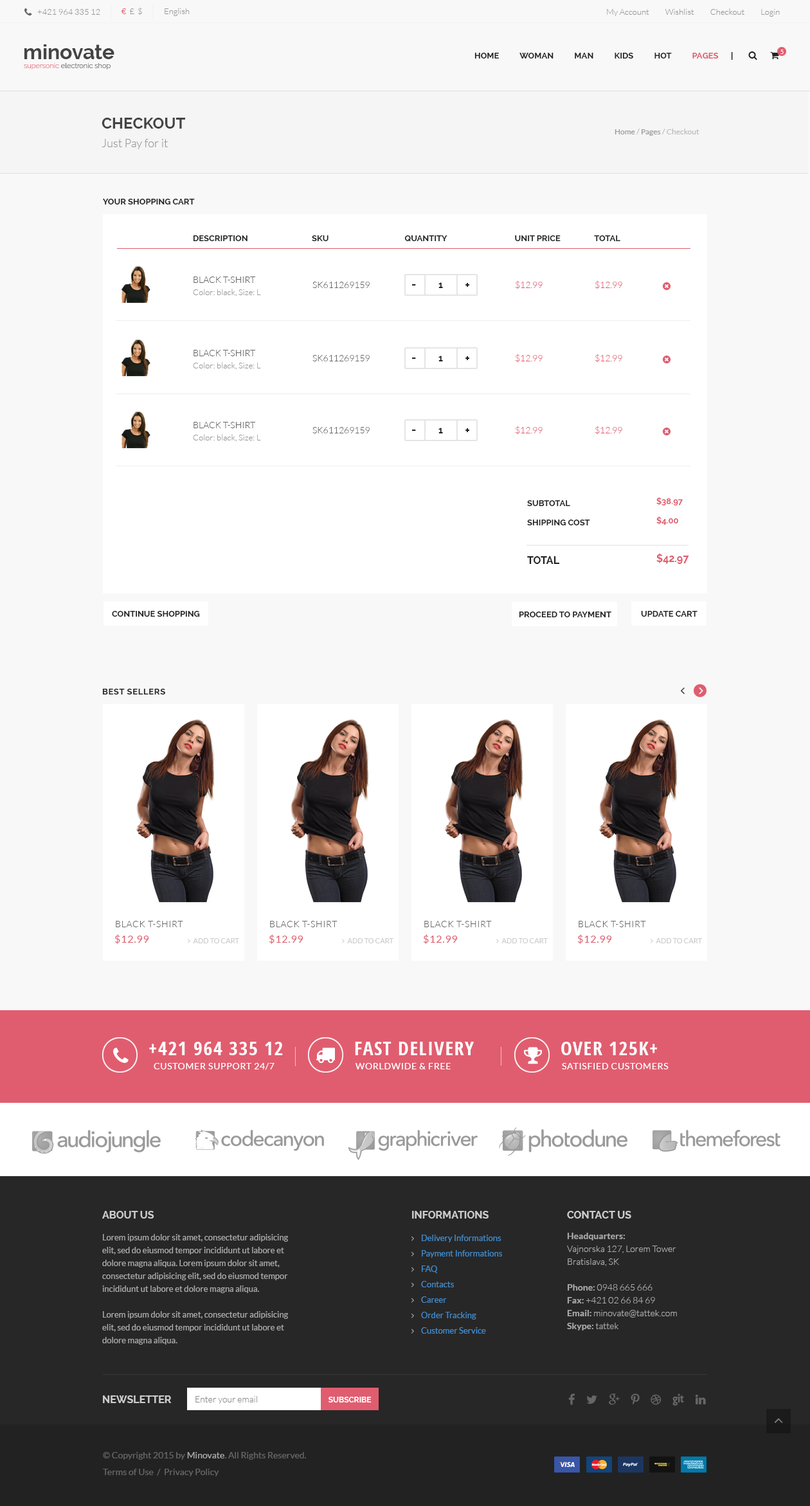
<style>
.page{position:relative;width:810px;height:1506px;background:#ffffff}
.page>*{position:absolute;margin:0}
.t1{font:8.4px "Lato-Light";color:#999999;text-transform:uppercase}
.t2{font:8.4px "Lato-Light";color:#999999}
.t3{font:8.4px "Lato-Light";color:#e05d6f}
.t4{font:20.6px "Raleway-Bold";color:#444444}
.t5{font:5.8px "Lato-Regular";color:#ffffff;text-transform:uppercase}
.t6{font:7.1px "Raleway-Light";color:#444444}
.t7{font:7.1px "Raleway-Light";color:#e05d6f}
.t8{font:15.4px "Raleway-Bold";color:#444444;text-transform:uppercase}
.t9{font:7.7px "Lato-Regular";color:#bbbbbb}
.t10{font:7.7px "Lato-Regular";color:#999999}
.t11{font:11.6px "Lato-Light";color:#999999}
.t12{font:8.4px "Raleway-Bold";color:#222222;text-transform:uppercase}
.t13{font:9px "Lato-Light";color:#666666;text-transform:uppercase}
.t14{font:9px "Lato-Light";color:#e05d6f}
.t15{font:11.6px "Raleway-Bold";color:#222222;text-transform:uppercase}
.t16{font:9px "Raleway-Bold";color:#222222;text-transform:uppercase}
.t17{font:8.4px/19.3px "Raleway-Bold";color:#e05d6f;text-transform:uppercase}
.t18{font:10.3px/19.3px "Raleway-Bold";color:#e05d6f;text-transform:uppercase}
.t19{font:8.4px/19.3px "Raleway-Bold";color:#222222;text-transform:uppercase}
.t20{font:10.3px/19.3px "Raleway-Bold";color:#222222;text-transform:uppercase}
.t21{font:8.4px "Raleway-Bold";letter-spacing:0.05em;color:#222222;text-transform:uppercase}
.t22{font:9px "Lato-Light";letter-spacing:0.05em;color:#666666;text-transform:uppercase}
.t23{font:10.3px "Lato-Regular";letter-spacing:0.05em;color:#e05d6f;text-transform:uppercase}
.t24{font:19.3px "OpenSans-CondensedBold";letter-spacing:0.05em;color:#ffffff;text-transform:uppercase}
.t25{font:9px "Lato-Regular";letter-spacing:0.05em;color:#ffffff;text-transform:uppercase}
.t26{font:10.3px "Raleway-Bold";color:#cccccc;text-transform:uppercase}
.t27{font:8.4px/12.9px "Lato-Regular";color:#aaaaaa}
.t28{font:8.4px/15.4px "Lato-Regular";color:#428bca}
.t29{font:9px/12.9px "Lato-Light";color:#aaaaaa}
.t30{font:9px/12.9px "Lato-Bold";color:#aaaaaa}
.t31{font:9px "Lato-Light";color:#8c8c8c}
.t32{font:7.7px "Raleway-Bold";color:#ffffff;text-transform:uppercase}
.t33{font:9px "Lato-Regular";color:#666666}
.t34{font:9px "Lato-Regular";color:#aaaaaa}
</style>
<div class="page">
<p class="t1" style="left:37px;top:9px;width:63px;height:6px">+421 964 335 12</p>
<p class="t2" style="left:122px;top:7px;width:20px;height:8px"><span class="t3">€</span>  £  $</p>
<p class="t2" style="left:165px;top:8px;width:25px;height:8px">English</p>
<p class="t2" style="left:607px;top:8px;width:173px;height:9px">My Account          Wishlist          Checkout          Login</p>
<p class="t4" style="left:24px;top:44px;width:90px;height:15px">minovate</p>
<p class="t5" style="left:780px;top:50px;width:4px;height:4px">5</p>
<p class="t6" style="left:24px;top:63px;width:87px;height:6px"><span class="t7">supersonic </span>electronic shop</p>
<p class="t8" style="left:102px;top:118px;width:83px;height:11px">Checkout</p>
<p class="t9" style="left:615px;top:129px;width:84px;height:7px"><span class="t10">Home </span>/<span class="t10"> Pages </span>/ Checkout</p>
<p class="t11" style="left:102px;top:139px;width:66px;height:10px">Just Pay for it</p>
<p class="t12" style="left:103px;top:199px;width:92px;height:5px">Your Shopping Cart</p>
<p class="t12" style="left:193px;top:235px;width:427px;height:6px">Description                                SKU                                      quantity                                  unit price                 total</p>
<p class="t13" style="left:194px;top:276px;width:62px;height:7px">Black T-Shirt</p>
<p class="t13" style="left:312px;top:282px;width:58px;height:6px">SK611269159</p>
<p class="t14" style="left:515px;top:280px;width:28px;height:9px">$12.99</p>
<p class="t14" style="left:595px;top:280px;width:27px;height:9px">$12.99</p>
<p class="t2" style="left:193px;top:289px;width:68px;height:7px">Color: black, Size: L</p>
<p class="t15" style="left:412px;top:282px;width:57px;height:6px">-        <span class="t16">1</span>        +</p>
<p class="t13" style="left:194px;top:350px;width:62px;height:6px">Black T-Shirt</p>
<p class="t14" style="left:515px;top:354px;width:28px;height:9px">$12.99</p>
<p class="t14" style="left:595px;top:354px;width:27px;height:9px">$12.99</p>
<p class="t2" style="left:193px;top:362px;width:68px;height:8px">Color: black, Size: L</p>
<p class="t13" style="left:312px;top:355px;width:58px;height:6px">SK611269159</p>
<p class="t15" style="left:412px;top:356px;width:57px;height:5px">-        <span class="t16">1</span>        +</p>
<p class="t13" style="left:194px;top:422px;width:62px;height:6px">Black T-Shirt</p>
<p class="t14" style="left:515px;top:426px;width:28px;height:9px">$12.99</p>
<p class="t14" style="left:595px;top:426px;width:27px;height:9px">$12.99</p>
<p class="t2" style="left:193px;top:434px;width:68px;height:8px">Color: black, Size: L</p>
<p class="t13" style="left:312px;top:427px;width:58px;height:6px">SK611269159</p>
<p class="t15" style="left:412px;top:428px;width:57px;height:5px">-        <span class="t16">1</span>        +</p>
<p class="t17" style="left:656px;top:497px;width:33px;height:67px">$38.97<br>$4.00<br><br><span class="t18">$42.97</span></p>
<p class="t19" style="left:527px;top:500px;width:63px;height:64px">subtotal<br>shipping cost<br><br><span class="t20">total</span></p>
<p class="t12" style="left:112px;top:611px;width:88px;height:5px">Continue shopping</p>
<p class="t12" style="left:519px;top:611px;width:92px;height:6px">Proceed to payment</p>
<p class="t12" style="left:641px;top:611px;width:57px;height:5px">update cart</p>
<p class="t21" style="left:102px;top:688px;width:63px;height:6px">Best sellers</p>
<p class="t22" style="left:116px;top:921px;width:67px;height:6px">Black T-Shirt</p>
<p class="t22" style="left:270px;top:921px;width:68px;height:6px">Black T-Shirt</p>
<p class="t22" style="left:424px;top:921px;width:68px;height:6px">Black T-Shirt</p>
<p class="t22" style="left:579px;top:921px;width:67px;height:6px">Black T-Shirt</p>
<p class="t23" style="left:115px;top:934px;width:34px;height:10px">$12.99</p>
<p class="t23" style="left:269px;top:934px;width:34px;height:10px">$12.99</p>
<p class="t23" style="left:424px;top:934px;width:34px;height:10px">$12.99</p>
<p class="t23" style="left:578px;top:934px;width:34px;height:10px">$12.99</p>
<p class="t24" style="left:149px;top:1041px;width:134px;height:14px">+421 964 335 12</p>
<p class="t24" style="left:355px;top:1041px;width:119px;height:14px">fast delivery</p>
<p class="t24" style="left:561px;top:1041px;width:96px;height:14px">over 125k+</p>
<p class="t25" style="left:154px;top:1063px;width:120px;height:7px">Customer support 24/7</p>
<p class="t25" style="left:356px;top:1063px;width:95px;height:6px">worldwide &amp; free</p>
<p class="t25" style="left:562px;top:1063px;width:107px;height:6px">satisfied customers</p>
<p class="t26" style="left:102px;top:1210px;width:52px;height:8px">About Us</p>
<p class="t26" style="left:412px;top:1210px;width:77px;height:8px">Informations</p>
<p class="t26" style="left:567px;top:1210px;width:64px;height:8px">Contact Us</p>
<p class="t27" style="left:102px;top:1234px;width:187px;height:110px">Lorem ipsum dolor sit amet, consectetur adipisicing elit, sed do eiusmod tempor incididunt ut labore et dolore magna aliqua. Lorem ipsum dolor sit amet, consectetur adipisicing elit, sed do eiusmod tempor incididunt ut labore et dolore magna aliqua. <br><br>Lorem ipsum dolor sit amet, consectetur adipisicing elit, sed do eiusmod tempor incididunt ut labore et dolore magna aliqua.</p>
<p class="t28" style="left:421px;top:1234px;width:81px;height:99px">Delivery Informations<br>Payment Informations<br>FAQ<br>Contacts<br>Career<br>Order Tracking<br>Customer Service</p>
<p class="t29" style="left:567px;top:1232px;width:110px;height:98px"><span class="t30">Headquarters:<br></span>Vajnorska 127, Lorem Tower<br>Bratislava, SK<br><br><span class="t30">Phone: </span>0948 665 666<br><span class="t30">Fax: </span>+421 02 66 84 69<br><span class="t30">Email: </span>minovate@tattek.com<br><span class="t30">Skype:</span> tattek</p>
<p class="t26" style="left:103px;top:1395px;width:69px;height:8px">Newsletter</p>
<p class="t31" style="left:195px;top:1396px;width:62px;height:7px">Enter your email</p>
<p class="t32" style="left:328px;top:1396px;width:44px;height:6px">Subscribe</p>
<p class="t33" style="left:103px;top:1452px;width:203px;height:7px">© Copyright 2015 by <span class="t34">Minovate</span>. All Rights Reserved.</p>
<p class="t33" style="left:103px;top:1468px;width:116px;height:8px">Terms of Use  /  Privacy Policy</p>
</div>
